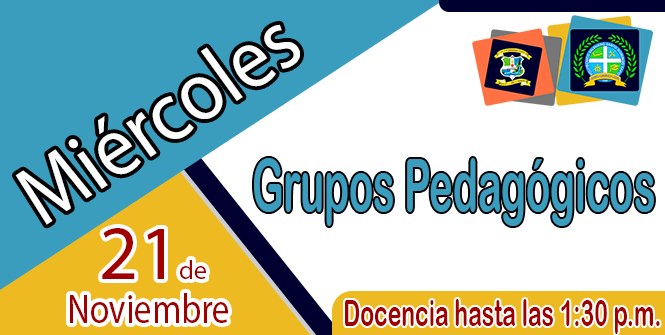
<style>
.page{position:relative;width:665px;height:335px;background:#ffffff}
.page>*{position:absolute;margin:0}
.t1{font:86.3px "MyriadPro-Regular";color:#ffffff;scale:0.91 1}
.t2{font:73.4px "ArialRoundedMTBold";color:#3b9dbe;scale:0.54 1}
.t3{font:77.4px "MyriadPro-Regular";color:#a10000}
.t4{font:26.2px "MyriadPro-Regular";color:#a10000}
.t5{font:41.4px "MyriadPro-Regular";color:#a10000;scale:0.85 1}
.t6{font:37.2px "ArialRoundedMTBold";color:#a10000;scale:0.62 1}
</style>
<div class="page">
<p class="t1" style="left:15px;top:24px;width:285px;height:201px;rotate:-33deg">Miércoles</p>
<p class="t2" style="left:254px;top:158px;width:400px;height:68px">Grupos Pedagógicos</p>
<p class="t3" style="left:102px;top:228px;width:104px;height:51px">21<span class="t4">de</span></p>
<p class="t5" style="left:70px;top:293px;width:158px;height:30px">Noviembre</p>
<p class="t6" style="left:345px;top:299px;width:315px;height:35px">Docencia hasta las 1:30 p.m.</p>
</div>
